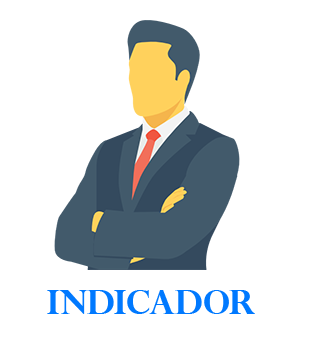
<style>
.page{position:relative;width:318px;height:346px;background:#ffffff}
.page>*{position:absolute;margin:0}
.t1{font:32.5px "PerpetuaTitlingMT-Bold";color:#0079ff}
</style>
<div class="page">
<p class="t1" style="left:47px;top:290px;width:208px;height:24px">Indicador</p>
</div>
